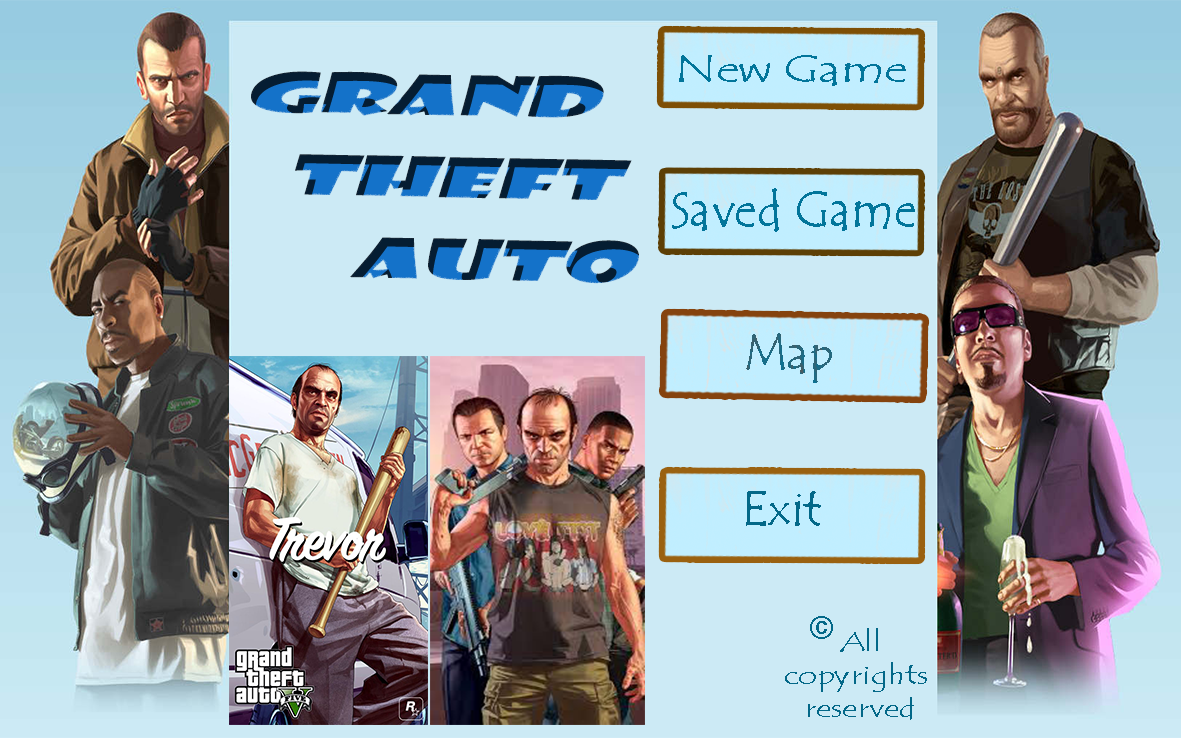
<style>
.page{position:relative;width:1181px;height:738px;background:#cceaf5}
.page>*{position:absolute;margin:0}
.t1{font:39px "TempusSansITC";color:#02759a;scale:1.28 1}
.t2{font:53.4px/82.2px "ShowcardGothic-Reg";font-style:italic;scale:2 1}
.t3{font:50.8px "TempusSansITC";color:#02759a}
.t4{font:50px "TempusSansITC";color:#27687d}
.t5{font:50px "TempusSansITC";color:#036888}
.t6{font:104.2px "TempusSansITC";color:#036888}
.t7{font:27.5px "TempusSansITC";color:#036888;scale:1.2 1}
</style>
<div class="page">
<p class="t1" style="left:679px;top:55px;width:227px;height:31px">New Game</p>
<p class="t2" style="left:251px;top:71px;width:388px;height:213px;text-align:center;rotate:1deg">Grand<br>   Theft<br>       Auto</p>
<p class="t3" style="left:672px;top:188px;width:243px;height:44px">Saved Game</p>
<p class="t4" style="left:746px;top:333px;width:86px;height:50px">Map</p>
<p class="t5" style="left:746px;top:491px;width:75px;height:35px">Exit</p>
<p class="t6" style="left:810px;top:616px;width:23px;height:23px">©</p>
<p class="t7" style="left:785px;top:628px;width:142px;height:92px;text-align:center">All<br>copyrights <br>reserved</p>
</div>
